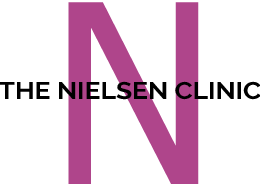
<style>
.page{position:relative;width:260px;height:185px;background:#ffffff}
.page>*{position:absolute;margin:0}
.t1{font:250px "Tahoma";color:#af458b}
.t2{font:24px "Raleway-Bold";color:#000000;scale:1.1 1}
</style>
<div class="page">
<p class="t1" style="left:68px;top:2px;width:131px;height:182px">N</p>
<p class="t2" style="left:0px;top:81px;width:261px;height:19px">THE NIELSEN CLINIC</p>
</div>
